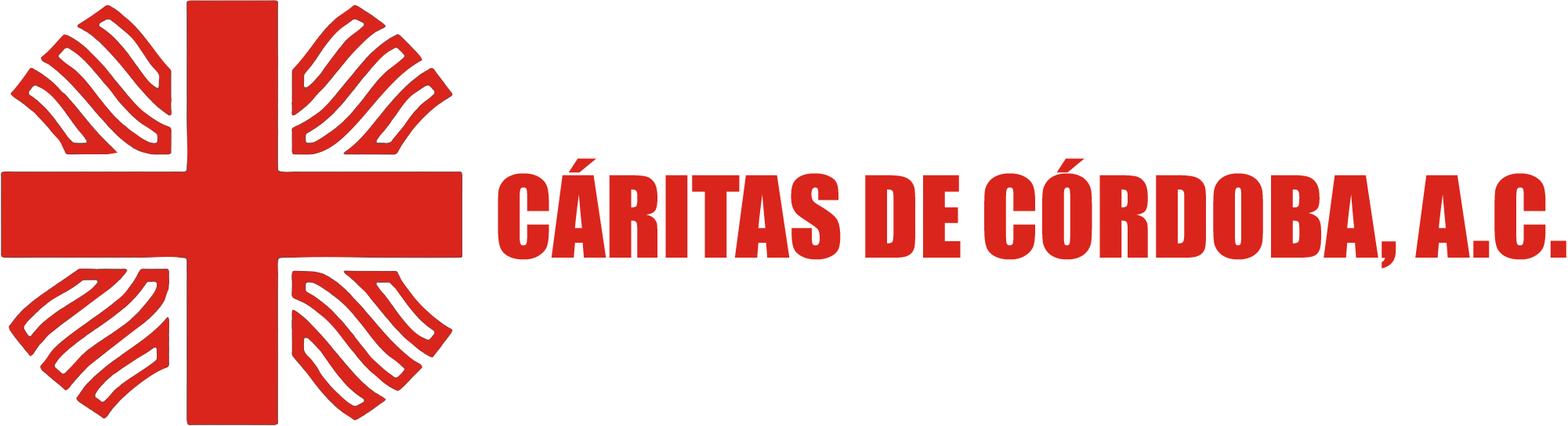
<style>
.page{position:relative;width:1568px;height:426px;background:#ffffff}
.page>*{position:absolute;margin:0}
.t1{font:104.5px "Impact";color:#da251c}
</style>
<div class="page">
<p class="t1" style="left:498px;top:158px;width:1068px;height:111px">CÁRITAS DE CÓRDOBA, A.C.</p>
</div>
